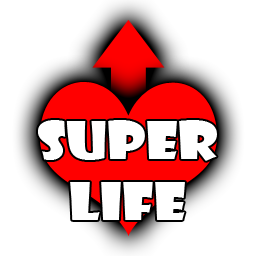
<style>
.page{position:relative;width:256px;height:256px;background:#ffffff}
.page>*{position:absolute;margin:0}
.t1{font:51px "ShowcardGothic-Reg";color:#ffffff;scale:1.14 1}
</style>
<div class="page">
<p class="t1" style="left:38px;top:120px;width:179px;height:100px;text-align:center">SUPER<br>LIFE</p>
</div>
